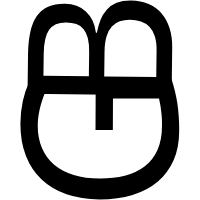
<style>
.page{position:relative;width:200px;height:200px;background:#ffffff}
.page>*{position:absolute;margin:0}
.t1{font:201.8px "DroidSans";color:#000000}
.t2{font:216.4px "DroidSans";color:#000000}
</style>
<div class="page">
<p class="t1" style="left:27px;top:0px;width:146px;height:96px;rotate:-89deg">B</p>
<p class="t2" style="left:20px;top:78px;width:160px;height:122px;rotate:-90deg">G</p>
</div>
